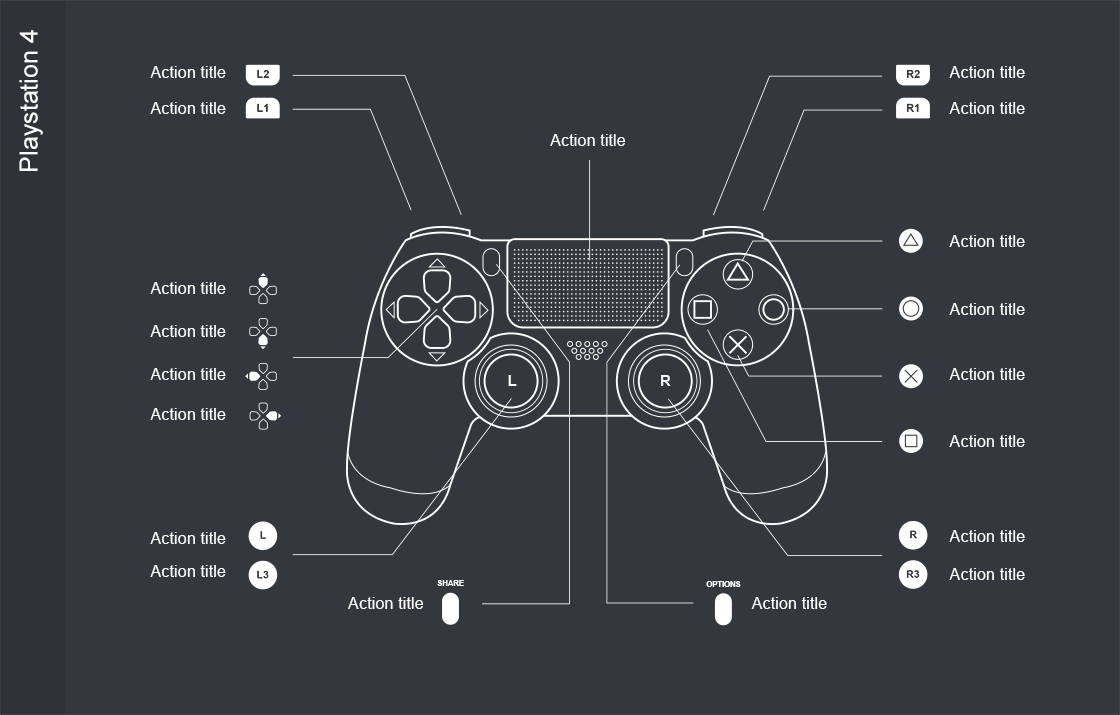
<style>
.page{position:relative;width:1120px;height:715px;background:#35373e}
.page>*{position:absolute;margin:0}
.t1{font:25px "ArialMT";color:#ffffff}
.t2{font:16.4px "ArialMT";color:#ffffff}
.t3{font:7.6px "Arial-BoldMT";color:#ffffff}
</style>
<div class="page">
<p class="t1" style="left:19px;top:30px;width:24px;height:141px;rotate:-90deg">Playstation 4</p>
<p class="t2" style="left:150px;top:66px;width:76px;height:12px">Action title</p>
<p class="t2" style="left:949px;top:66px;width:76px;height:12px">Action title</p>
<p class="t2" style="left:150px;top:102px;width:76px;height:12px">Action title</p>
<p class="t2" style="left:949px;top:102px;width:76px;height:12px">Action title</p>
<p class="t2" style="left:550px;top:134px;width:76px;height:12px">Action title</p>
<p class="t2" style="left:949px;top:235px;width:76px;height:12px">Action title</p>
<p class="t2" style="left:150px;top:282px;width:76px;height:12px">Action title</p>
<p class="t2" style="left:949px;top:303px;width:76px;height:12px">Action title</p>
<p class="t2" style="left:150px;top:325px;width:76px;height:12px">Action title</p>
<p class="t2" style="left:150px;top:368px;width:76px;height:12px">Action title</p>
<p class="t2" style="left:949px;top:368px;width:76px;height:12px">Action title</p>
<p class="t2" style="left:150px;top:408px;width:76px;height:12px">Action title</p>
<p class="t2" style="left:949px;top:435px;width:76px;height:12px">Action title</p>
<p class="t2" style="left:150px;top:532px;width:76px;height:12px">Action title</p>
<p class="t2" style="left:949px;top:530px;width:76px;height:12px">Action title</p>
<p class="t2" style="left:150px;top:565px;width:76px;height:12px">Action title</p>
<p class="t2" style="left:949px;top:568px;width:76px;height:12px">Action title</p>
<p class="t3" style="left:437px;top:580px;width:27px;height:6px">SHARE</p>
<p class="t3" style="left:706px;top:581px;width:35px;height:6px">OPTIONS</p>
<p class="t2" style="left:348px;top:597px;width:76px;height:12px">Action title</p>
<p class="t2" style="left:751px;top:597px;width:76px;height:12px">Action title</p>
</div>
